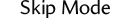
<style>
.page{position:relative;width:132px;height:18px;background:#ffffff}
.page>*{position:absolute;margin:0}
.t1{font:20px "Amira-Roman";color:#000000}
</style>
<div class="page">
<p class="t1" style="left:20px;top:0px;width:90px;height:19px;opacity:0.96">Skip Mode</p>
</div>
